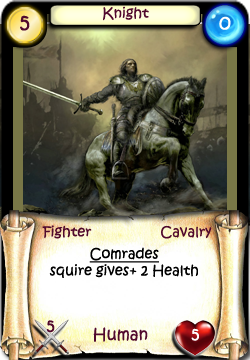
<style>
.page{position:relative;width:250px;height:360px}
.page>*{position:absolute;margin:0}
.t1{font:14px "KristenITC-Regular";color:#51092d}
.t2{font:20px "KristenITC-Regular";color:#51092d}
.t3{font:20px "KristenITC-Regular";color:#ffffff}
.t4{font:14px "KristenITC-Regular";color:#000000}
.t5{font:14px "KristenITC-Regular";color:#000000;text-decoration:underline}
.t6{font:16px "KristenITC-Regular";color:#51092d}
.t7{font:16px "KristenITC-Regular";color:#fefefe}
</style>
<div class="page">
<p class="t1" style="left:103px;top:6px;width:46px;height:15px">Knight</p>
<p class="t2" style="left:20px;top:15px;width:10px;height:16px">5</p>
<p class="t3" style="left:219px;top:16px;width:12px;height:14px">0</p>
<p class="t1" style="left:42px;top:225px;width:50px;height:14px">Fighter</p>
<p class="t1" style="left:161px;top:225px;width:51px;height:14px">Cavalry</p>
<p class="t4" style="left:49px;top:247px;width:149px;height:31px;text-align:center"><span class="t5">Comrades<br></span>squire gives+ 2 Health</p>
<p class="t6" style="left:46px;top:320px;width:9px;height:13px">5</p>
<p class="t6" style="left:93px;top:327px;width:55px;height:15px">Human</p>
<p class="t7" style="left:191px;top:328px;width:8px;height:13px">5</p>
</div>
